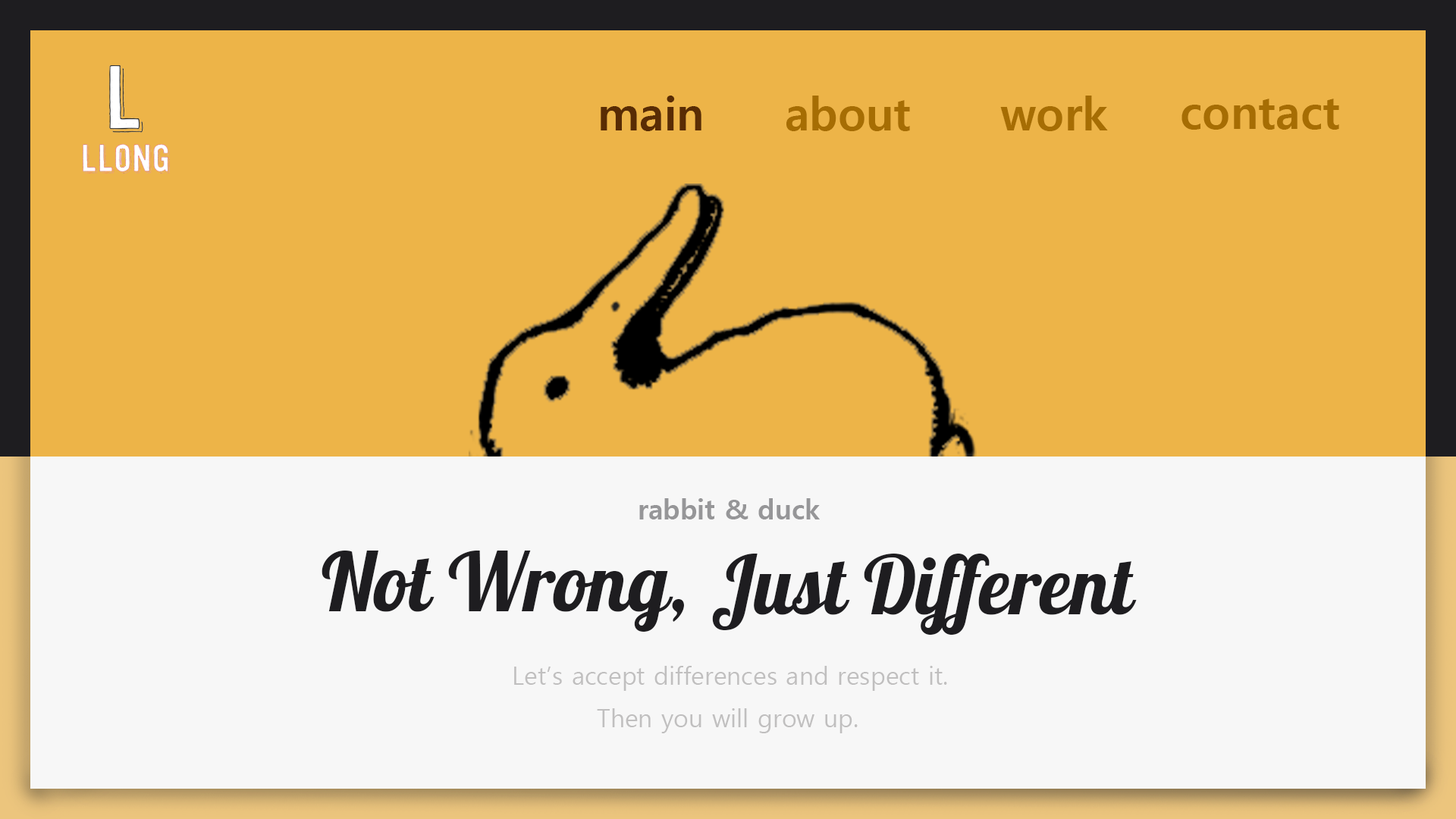
<style>
.page{position:relative;width:1456px;height:819px;background:#edb448}
.page>*{position:absolute;margin:0}
.t1{font:45.5px "MalgunGothicBold";color:#592c04}
.t2{font:45.5px "MalgunGothicBold";color:#a66d03}
.t3{font:27.3px "MalgunGothicBold";color:#969698}
.t4{font:79.6px "Galada-Regular";color:#1e1d20}
.t5{font:25px "MalgunGothic";color:#c0bfbf}
</style>
<div class="page">
<p class="t1" style="left:601px;top:96px;width:100px;height:35px">main</p>
<p class="t2" style="left:786px;top:96px;width:124px;height:35px">about</p>
<p class="t2" style="left:1000px;top:96px;width:108px;height:35px">work</p>
<p class="t2" style="left:1181px;top:99px;width:158px;height:31px">contact</p>
<p class="t3" style="left:639px;top:498px;width:181px;height:21px">rabbit &amp; duck</p>
<p class="t4" style="left:322px;top:551px;width:362px;height:81px">Not Wrong,</p>
<p class="t4" style="left:712px;top:554px;width:425px;height:81px">Just Different</p>
<p class="t5" style="left:514px;top:666px;width:433px;height:25px">Let’s accept differences and respect it.</p>
<p class="t5" style="left:597px;top:708px;width:261px;height:25px">Then you will grow up.</p>
</div>
